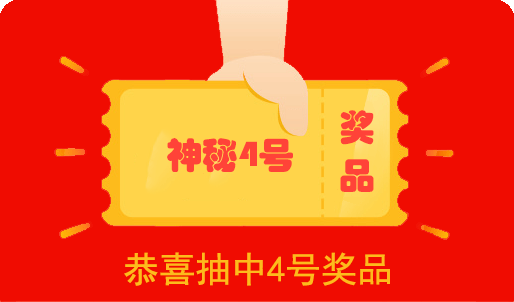
<style>
.page{position:relative;width:514px;height:302px;background:#f00c01}
.page>*{position:absolute;margin:0}
.t1{font:36px/48px "STHupo";color:#ff4338}
.t2{font:36px "STHupo";color:#ff4338}
.t3{font:36px "SimHei";color:#fdbb1c}
</style>
<div class="page">
<p class="t1" style="left:340px;top:110px;width:34px;height:82px;text-align:center">奖<br>品</p>
<p class="t2" style="left:167px;top:138px;width:126px;height:35px">神秘4号</p>
<p class="t3" style="left:124px;top:252px;width:266px;height:34px">恭喜抽中4号奖品</p>
</div>
